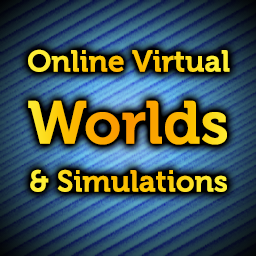
<style>
.page{position:relative;width:256px;height:256px}
.page>*{position:absolute;margin:0}
.t1{font:30px "Museo-700";letter-spacing:-0.025em;font-weight:bold}
.t2{font:60px "Museo-700";letter-spacing:-0.025em;font-weight:bold}
.t3{font:30px/48px "Museo-700";letter-spacing:-0.025em;font-weight:bold}
</style>
<div class="page">
<p class="t1" style="left:28px;top:49px;width:202px;height:143px;text-align:center">Online Virtual<br><span class="t2">Worlds<br></span><span class="t3">&amp; Simulations</span></p>
</div>
